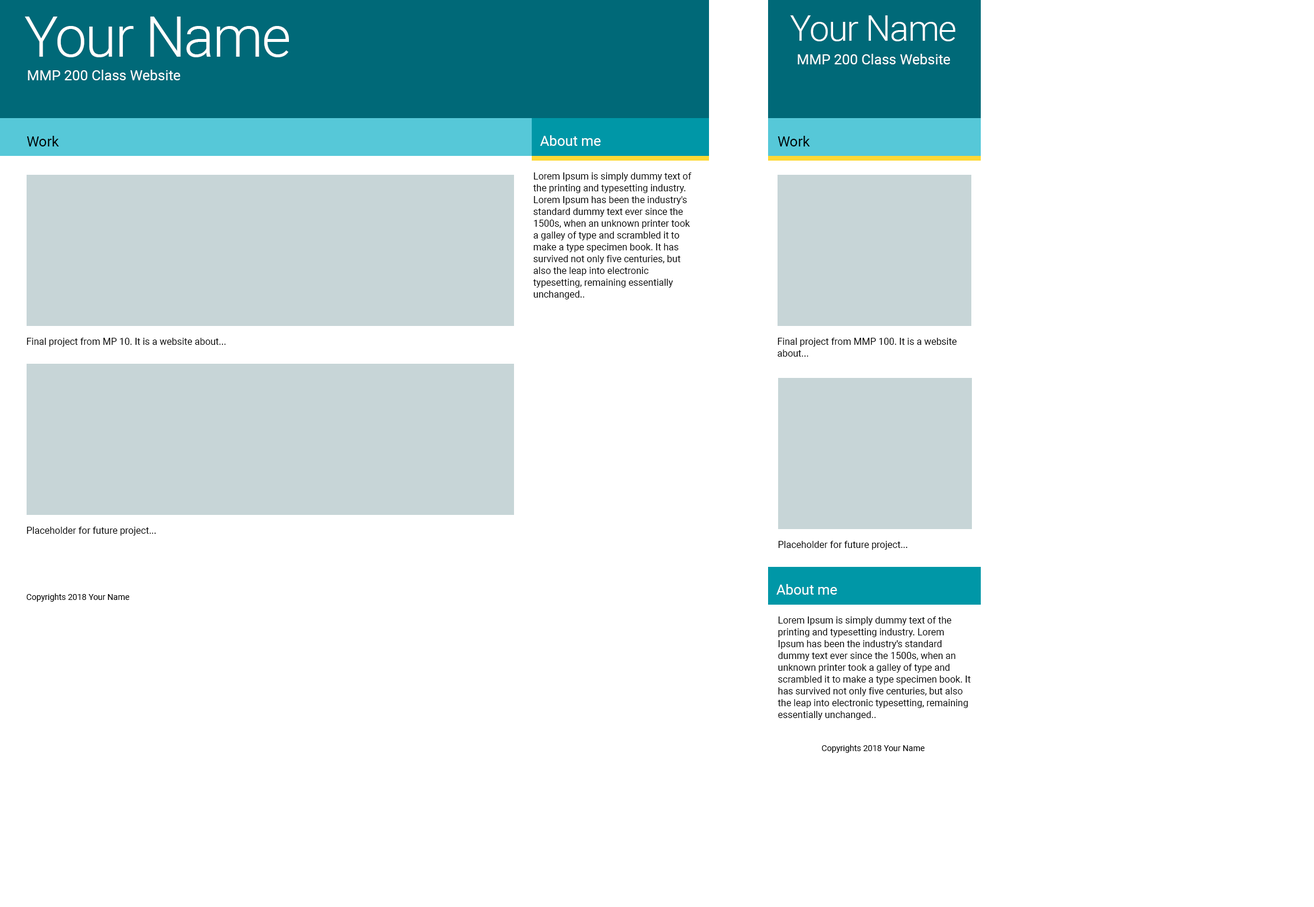
<style>
.page{position:relative;width:1314px;height:907px;background:#ffffff}
.page>*{position:absolute;margin:0}
.t1{font:56.7px "Roboto-Light";letter-spacing:-0.025em;color:#ffffff}
.t2{font:35.4px "Roboto-Light";letter-spacing:-0.025em;color:#ffffff}
.t3{font:14.2px "Roboto-Regular";color:#ffffff}
.t4{font:14.2px "Roboto-Regular";color:#000000}
.t5{font:9.5px/11.8px "Roboto-Regular";color:#000000}
.t6{font:9.5px "Roboto-Regular";color:#000000}
.t7{font:8.3px "Roboto-Regular";color:#010101}
</style>
<div class="page">
<p class="t1" style="left:25px;top:17px;width:264px;height:40px">Your Name</p>
<p class="t2" style="left:790px;top:15px;width:165px;height:26px">Your Name</p>
<p class="t3" style="left:798px;top:54px;width:152px;height:10px">MMP 200 Class Website</p>
<p class="t3" style="left:28px;top:70px;width:152px;height:10px">MMP 200 Class Website</p>
<p class="t4" style="left:27px;top:136px;width:32px;height:11px">Work</p>
<p class="t3" style="left:540px;top:135px;width:61px;height:11px">About me</p>
<p class="t4" style="left:778px;top:136px;width:32px;height:11px">Work</p>
<p class="t5" style="left:533px;top:173px;width:159px;height:127px">Lorem Ipsum is simply dummy text of the printing and typesetting industry. Lorem Ipsum has been the industry's standard dummy text ever since the 1500s, when an unknown printer took a galley of type and scrambled it to make a type specimen book. It has survived not only five centuries, but also the leap into electronic typesetting, remaining essentially unchanged..</p>
<p class="t6" style="left:27px;top:338px;width:199px;height:9px">Final project from MP 10. It is a website about...</p>
<p class="t5" style="left:778px;top:338px;width:179px;height:19px">Final project from MMP 100. It is a website about...</p>
<p class="t6" style="left:27px;top:527px;width:129px;height:9px">Placeholder for future project...</p>
<p class="t6" style="left:778px;top:541px;width:129px;height:9px">Placeholder for future project...</p>
<p class="t7" style="left:27px;top:594px;width:102px;height:8px">Copyrights 2018 Your Name</p>
<p class="t3" style="left:776px;top:584px;width:61px;height:11px">About me</p>
<p class="t5" style="left:778px;top:617px;width:193px;height:103px">Lorem Ipsum is simply dummy text of the printing and typesetting industry. Lorem Ipsum has been the industry's standard dummy text ever since the 1500s, when an unknown printer took a galley of type and scrambled it to make a type specimen book. It has survived not only five centuries, but also the leap into electronic typesetting, remaining essentially unchanged..</p>
<p class="t7" style="left:822px;top:745px;width:103px;height:8px">Copyrights 2018 Your Name</p>
</div>
